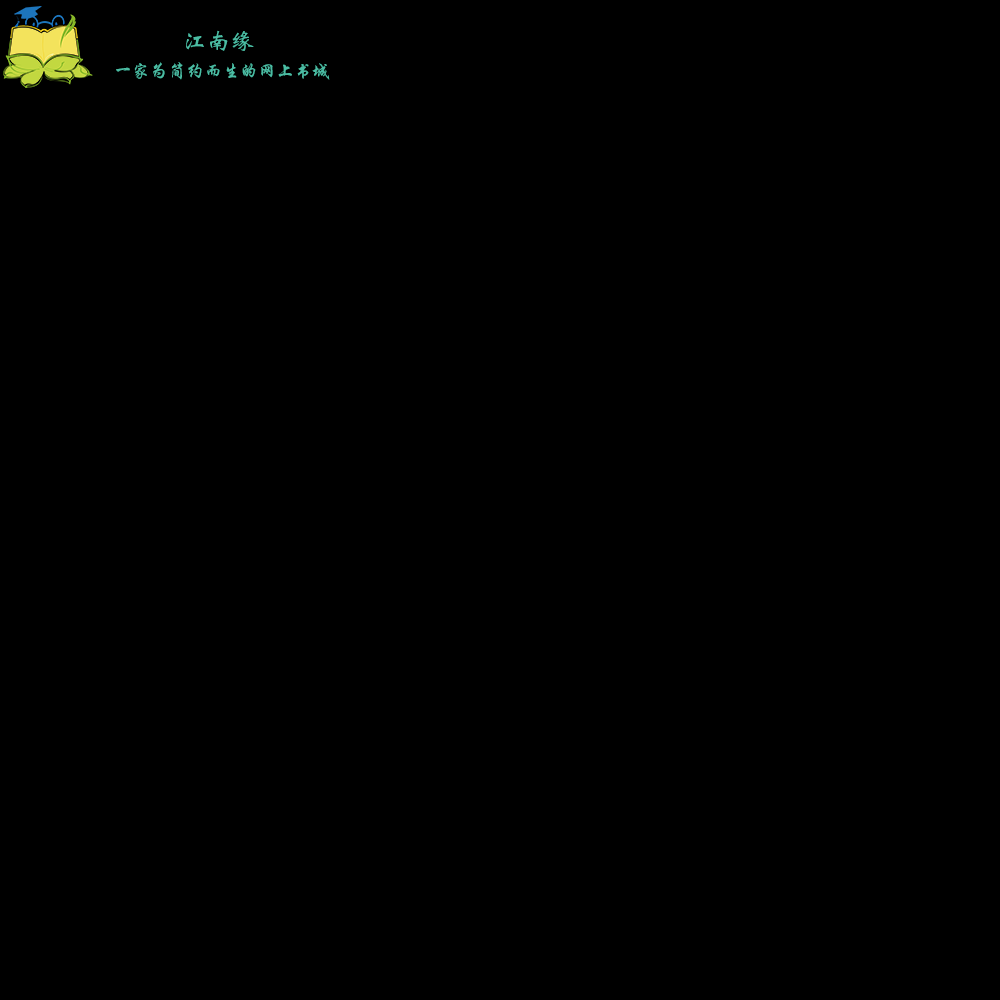
<style>
.page{position:relative;width:1000px;height:1000px;background:#000000}
.page>*{position:absolute;margin:0}
.t1{font:24px "STXinwei";color:#4bbca3}
.t2{font:18px "STXingkai";color:#4bbca3}
</style>
<div class="page">
<p class="t1" style="left:186px;top:30px;width:68px;height:21px">江南缘</p>
<p class="t2" style="left:116px;top:62px;width:214px;height:18px">一家为简约而生的网上书城</p>
</div>
